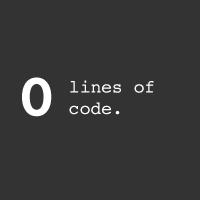
<style>
.page{position:relative;width:200px;height:200px;background:#333333}
.page>*{position:absolute;margin:0}
.t1{font:60px "Courier-Bold";color:#ffffff}
.t2{font:18px "Courier";color:#ffffff}
</style>
<div class="page">
<p class="t1" style="left:22px;top:77px;width:30px;height:40px">0</p>
<p class="t2" style="left:69px;top:80px;width:85px;height:35px">lines of code.</p>
</div>
